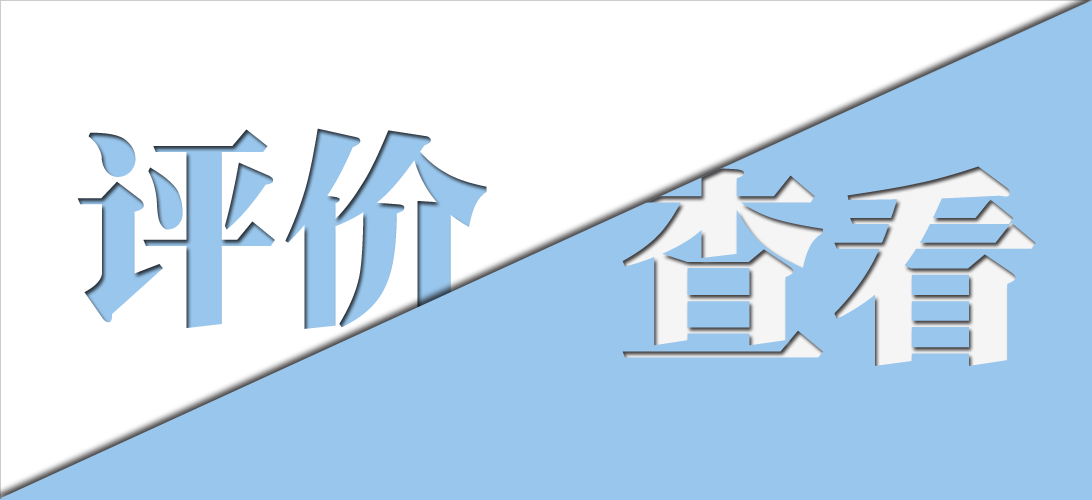
<style>
.page{position:relative;width:1092px;height:500px;background:#99c6ec}
.page>*{position:absolute;margin:0}
.t1{font:212.5px "DFPSongW12";color:#99c6ec}
.t2{font:212.5px "DFPSongW12";color:#f5f5f5}
</style>
<div class="page">
<p class="t1" style="left:77px;top:128px;width:410px;height:201px">评价</p>
<p class="t2" style="left:622px;top:166px;width:414px;height:200px">查看</p>
</div>
